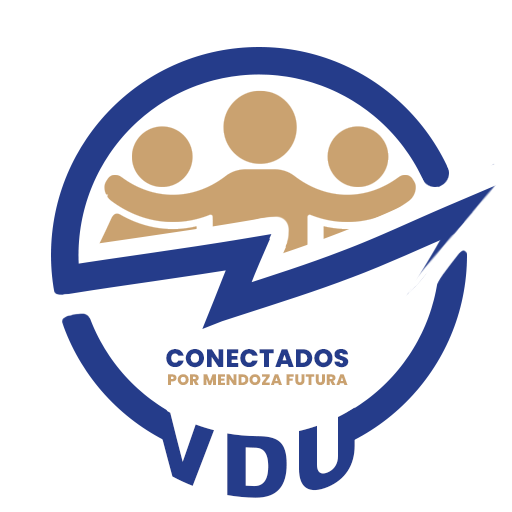
<style>
.page{position:relative;width:512px;height:512px;background:#ffffff}
.page>*{position:absolute;margin:0}
.t1{font:15.1px "Poppins-ExtraBold";letter-spacing:0.02em;color:#caa270}
.t2{font:25.2px "Poppins-ExtraBold";letter-spacing:0.02em;color:#253c8a}
.t3{font:89.7px "Fort-Extrabold";letter-spacing:0.02em;color:#253c8a}
</style>
<div class="page">
<p class="t1" style="left:166px;top:349px;width:183px;height:36px;text-align:center"><span class="t2">CONECTADOS<br></span>POR MENDOZA FUTURA</p>
<p class="t3" style="left:153px;top:401px;width:202px;height:97px">VDU</p>
</div>
